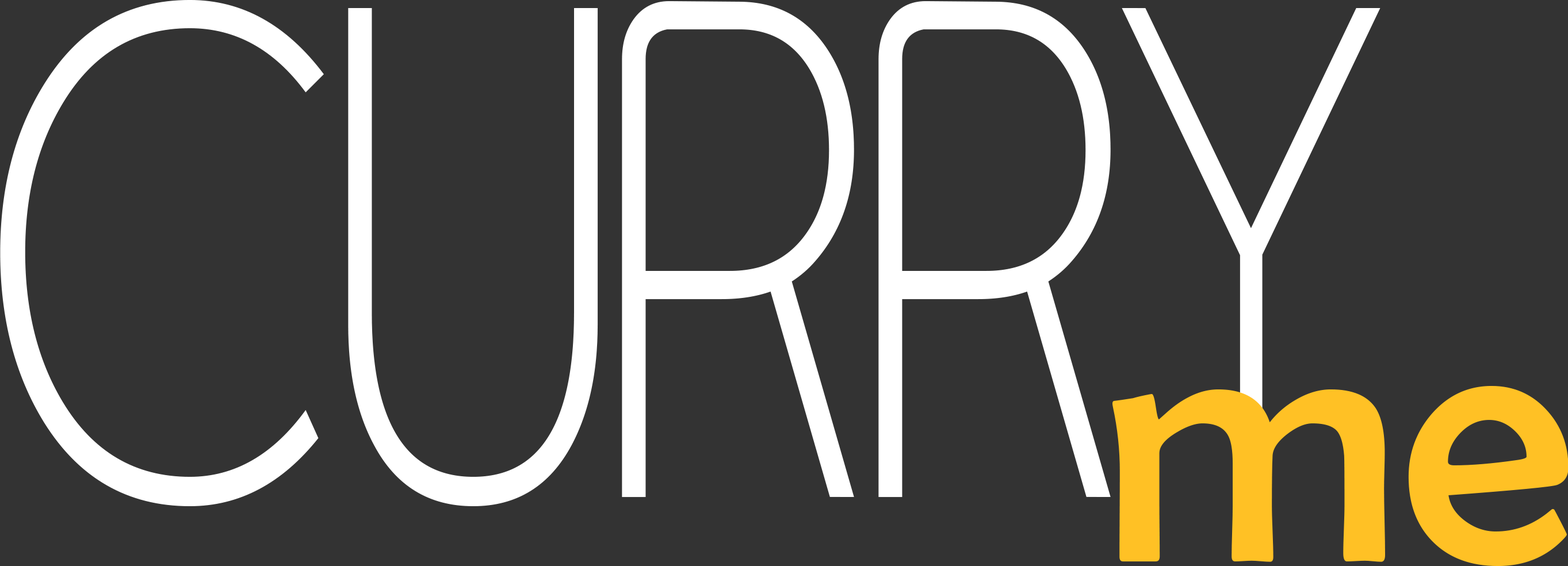
<style>
.page{position:relative;width:1568px;height:566px;background:#333333}
.page>*{position:absolute;margin:0}
.t1{font:838.8px "AsenineThin";color:#ffffff}
.t2{font:359.5px "BerlinSansFB-Reg";color:#ffc125}
</style>
<div class="page">
<p class="t1" style="left:0px;top:0px;width:1380px;height:506px">CURRY</p>
<p class="t2" style="left:1112px;top:386px;width:457px;height:180px">me</p>
</div>
